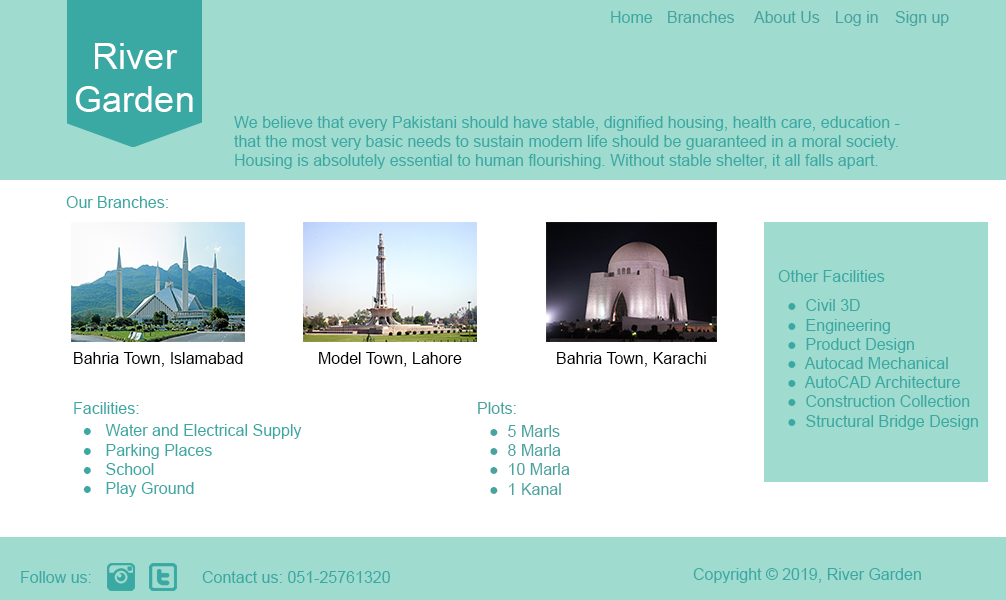
<style>
.page{position:relative;width:1006px;height:600px;background:#9fdbce}
.page>*{position:absolute;margin:0}
.t1{font:16px "ArialMT";color:#3aa9a3}
.t2{font:16px "ArialMT";color:#47a39f}
.t3{font:36px "ArialMT";color:#ffffff}
.t4{font:36px "ArialMT";color:#000000}
.t5{font:16px "ArialMT";color:#000000}
</style>
<div class="page">
<p class="t1" style="left:611px;top:11px;width:42px;height:12px">Home</p>
<p class="t2" style="left:668px;top:11px;width:66px;height:12px">Branches</p>
<p class="t2" style="left:754px;top:11px;width:66px;height:12px">About Us</p>
<p class="t2" style="left:836px;top:11px;width:42px;height:15px">Log in</p>
<p class="t2" style="left:895px;top:11px;width:54px;height:15px">Sign up</p>
<p class="t3" style="left:75px;top:43px;width:118px;height:69px;text-align:center"><span class="t4"><br></span>River Garden</p>
<p class="t1" style="left:234px;top:116px;width:666px;height:53px">We believe that every Pakistani should have stable, dignified housing, health care, education -<br>that the most very basic needs to sustain modern life should be guaranteed in a moral society.<br>Housing is absolutely essential to human flourishing. Without stable shelter, it all falls apart.</p>
<p class="t1" style="left:66px;top:196px;width:102px;height:12px">Our Branches:</p>
<p class="t1" style="left:778px;top:270px;width:107px;height:12px">Other Facilities</p>
<p class="t1" style="left:788px;top:299px;width:190px;height:131px">●  Civil 3D<br>●  Engineering<br>●  Product Design<br>●  Autocad Mechanical<br>●  AutoCAD Architecture<br>●  Construction Collection<br>●  Structural Bridge Design</p>
<p class="t5" style="left:74px;top:352px;width:169px;height:15px">Bahria Town, Islamabad</p>
<p class="t5" style="left:319px;top:352px;width:143px;height:15px">Model Town, Lahore</p>
<p class="t5" style="left:557px;top:352px;width:149px;height:15px">Bahria Town, Karachi</p>
<p class="t1" style="left:74px;top:402px;width:65px;height:12px">Facilities:</p>
<p class="t2" style="left:478px;top:402px;width:38px;height:12px">Plots:</p>
<p class="t1" style="left:83px;top:424px;width:219px;height:73px">●   Water and Electrical Supply<br>●   Parking Places<br>●   School<br>●   Play Ground</p>
<p class="t2" style="left:490px;top:425px;width:80px;height:70px">●  5 Marls<br>●  8 Marla<br>●  10 Marla<br>●  1 Kanal</p>
<p class="t1" style="left:693px;top:568px;width:228px;height:15px">Copyright © 2019, River Garden</p>
<p class="t1" style="left:21px;top:571px;width:70px;height:12px">Follow us:</p>
<p class="t1" style="left:202px;top:571px;width:188px;height:12px">Contact us: 051-25761320</p>
</div>
